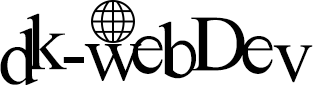
<style>
.page{position:relative;width:313px;height:85px;background:#ffffff}
.page>*{position:absolute;margin:0}
.t1{font:80px "New-Romantics";letter-spacing:0.025em;color:#000000}
</style>
<div class="page">
<p class="t1" style="left:0px;top:13px;width:313px;height:72px">dk-webDev</p>
</div>
